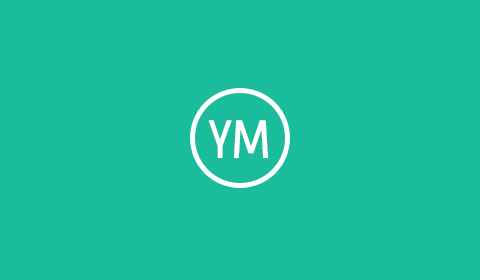
<style>
.page{position:relative;width:480px;height:280px;background:#1abc9c}
.page>*{position:absolute;margin:0}
.t1{font:54px "Cuprum-Regular";color:#ffffff}
</style>
<div class="page">
<p class="t1" style="left:208px;top:120px;width:60px;height:38px">YM</p>
</div>
